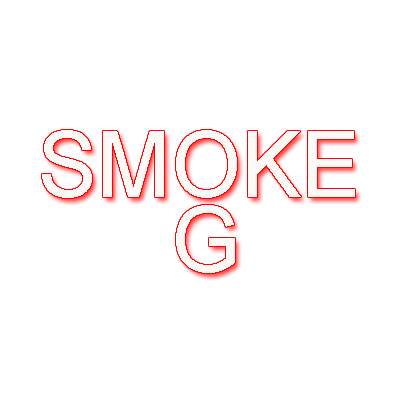
<style>
.page{position:relative;width:400px;height:400px;background:#ffffff}
.page>*{position:absolute;margin:0}
.t1{font:91.7px "ArialMT";color:#fbfaf7}
</style>
<div class="page">
<p class="t1" style="left:42px;top:130px;width:313px;height:68px">SMOKE</p>
<p class="t1" style="left:176px;top:205px;width:59px;height:68px">G</p>
</div>
